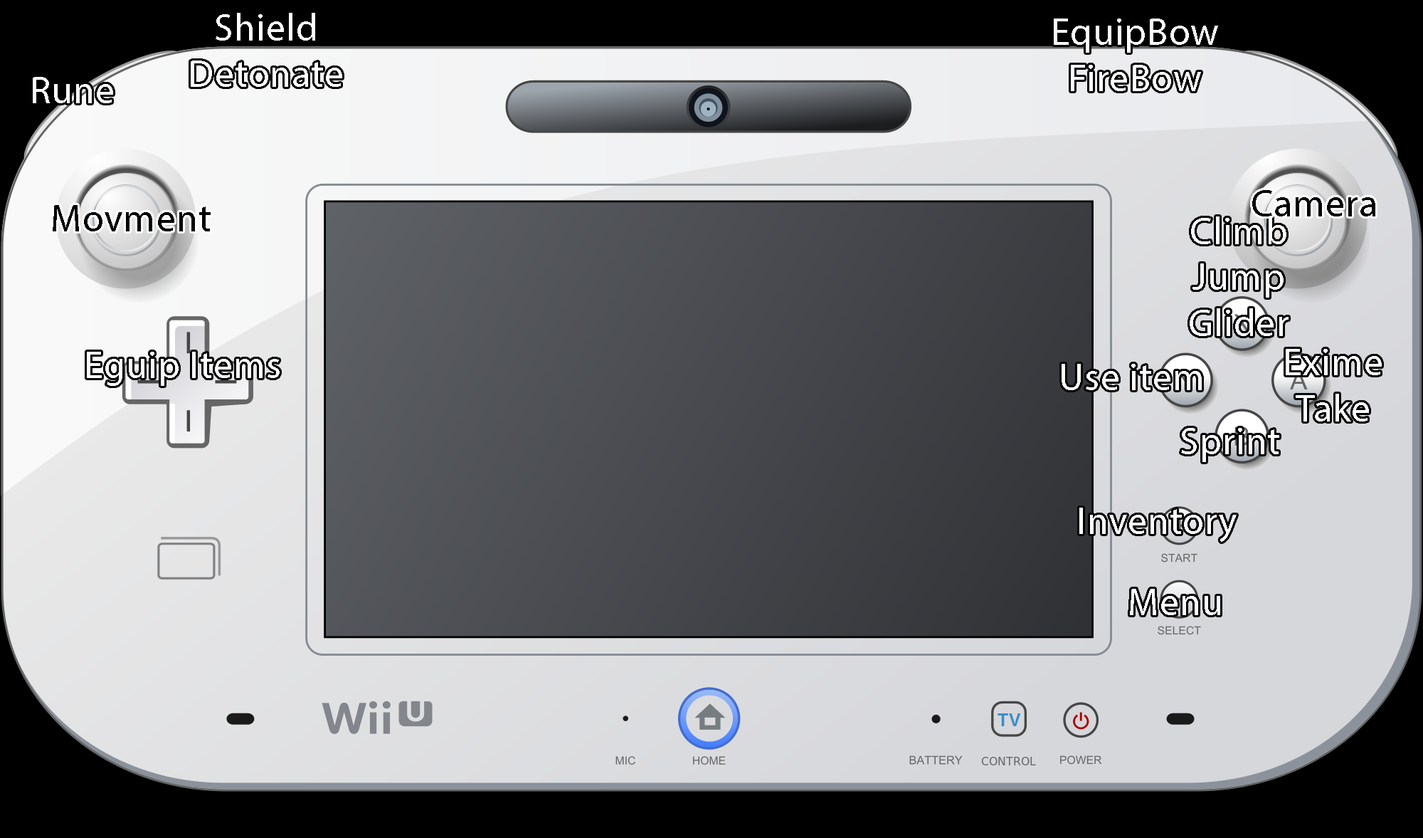
<style>
.page{position:relative;width:1423px;height:838px}
.page>*{position:absolute;margin:0}
.t1{font:38.4px "MyriadPro-Regular";letter-spacing:0.021em;color:#ffffff}
.t2{font:38.4px "MyriadPro-Regular";letter-spacing:0.021em;color:#000000}
</style>
<div class="page">
<p class="t1" style="left:191px;top:13px;width:151px;height:74px;text-align:center">Shield<br>Detonate</p>
<p class="t1" style="left:1054px;top:19px;width:164px;height:72px;text-align:center">EquipBow<br>FireBow</p>
<p class="t1" style="left:33px;top:77px;width:80px;height:26px">Rune</p>
<p class="t2" style="left:1253px;top:190px;width:123px;height:26px">Camera</p>
<p class="t2" style="left:53px;top:205px;width:158px;height:26px">Movment</p>
<p class="t1" style="left:1190px;top:216px;width:99px;height:120px;text-align:center">Climb<br>Jump<br>Glider</p>
<p class="t1" style="left:87px;top:352px;width:193px;height:34px">Eguip Items</p>
<p class="t1" style="left:1286px;top:349px;width:96px;height:72px;text-align:center">Exime<br>Take</p>
<p class="t1" style="left:1062px;top:364px;width:140px;height:26px">Use item</p>
<p class="t1" style="left:1181px;top:428px;width:99px;height:34px">Sprint</p>
<p class="t1" style="left:1080px;top:507px;width:157px;height:35px">Inventory</p>
<p class="t1" style="left:1130px;top:589px;width:91px;height:26px">Menu</p>
</div>
